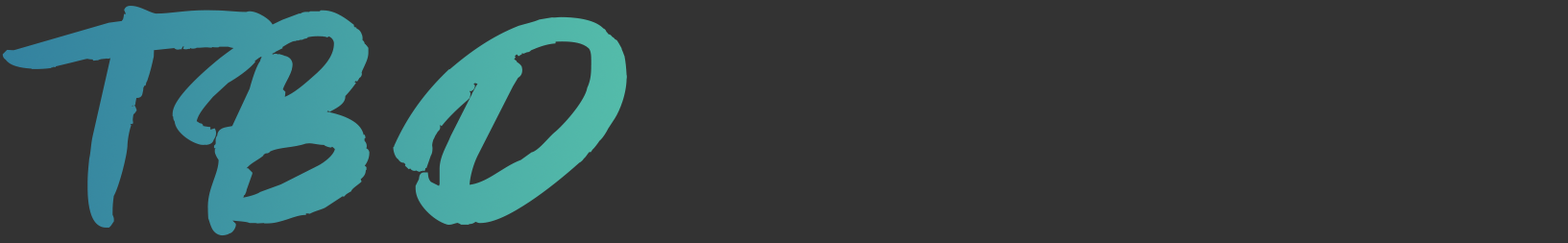
<style>
.page{position:relative;width:1568px;height:243px;background:#333333}
.page>*{position:absolute;margin:0}
.t1{font:324.1px "SummerLovingSolid-Regular";letter-spacing:0.1em;color:#439ea4;font-weight:bold}
</style>
<div class="page">
<p class="t1" style="left:2px;top:6px;width:625px;height:230px">TBD</p>
</div>
